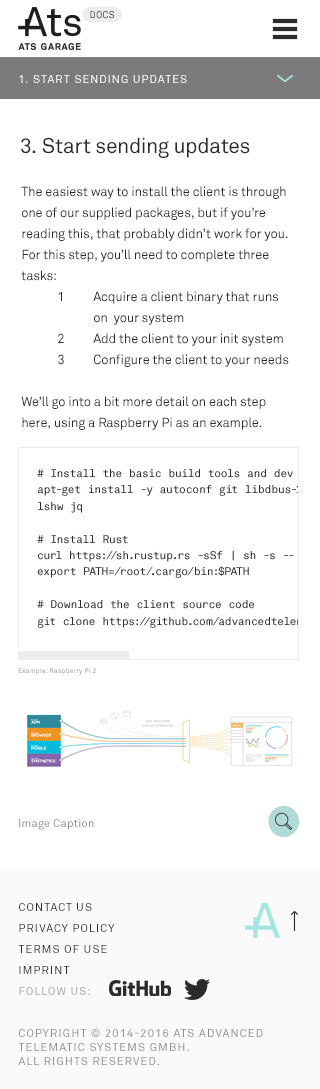
<style>
.page{position:relative;width:320px;height:1089px;background:#ffffff}
.page>*{position:absolute;margin:0}
.t1{font:9.5px "AkkuratStd-Mono";letter-spacing:0.05em;color:#2b2b2b;text-transform:uppercase}
.t2{font:11px "AkkuratStd";letter-spacing:0.1em;color:#ffffff;text-transform:uppercase}
.t3{font:21px "AkkuratStd";letter-spacing:-0.01em;color:#2b2b2b}
.t4{font:13px/21px "AkkuratStd";letter-spacing:-0.01em;color:#2b2b2b}
.t5{font:6.7px "AkkuratStd";letter-spacing:0.025em}
.t6{font:11px "AkkuratStd";letter-spacing:0.025em;color:#8e8e8e}
.t7{font:11px/14px "AkkuratStd";letter-spacing:0.1em;color:#8e8e8e;text-transform:uppercase}
.t8{font:11px/21px "AkkuratStd";letter-spacing:0.1em;color:#2b2b2b;text-transform:uppercase}
.t9{font:11px/21px "AkkuratStd";letter-spacing:0.1em;color:#a4a4a4;text-transform:uppercase}
</style>
<div class="page">
<p class="t1" style="left:90px;top:11px;width:24px;height:8px">Docs</p>
<p class="t2" style="left:19px;top:75px;width:168px;height:8px">1. start sending updates</p>
<p class="t3" style="left:21px;top:137px;width:229px;height:21px">3. Start sending updates</p>
<p class="t4" style="left:21px;top:186px;width:268px;height:244px">The easiest way to install the client is through one of our supplied packages, but if you’re reading this, that probably didn’t work for you. For this step, you’ll need to complete three tasks:<br> 1 Acquire a client binary that runs<br>  on  your system<br> 2 Add the client to your init system<br> 3 Configure the client to your needs<br><br>We’ll go into a bit more detail on each step here, using a Raspberry Pi as an example.</p>
<p class="t5" style="left:18px;top:668px;width:78px;height:7px">Example: Raspberry Pi 2</p>
<p class="t6" style="left:19px;top:819px;width:75px;height:11px">Image Caption</p>
<p class="t7" style="left:18px;top:903px;width:245px;height:162px"><span class="t8">contact us<br>Privacy Policy<br>Terms of Use<br>imprint<br></span><span class="t9">follow us:<br></span><br><br>Copyright © 2014-2016 ATS Advanced telematic systems gmbh. <br>All rights reserved.</p>
</div>
